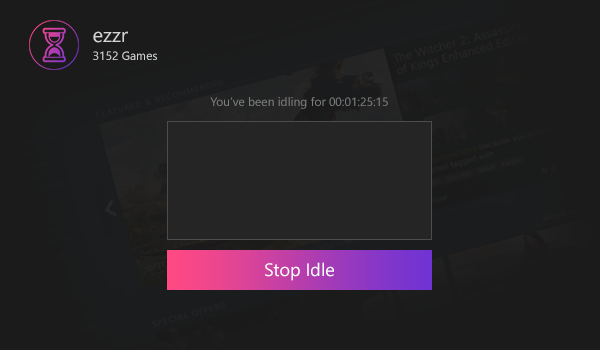
<style>
.page{position:relative;width:600px;height:350px;background:#1b1b1b}
.page>*{position:absolute;margin:0}
.t1{font:12px/18px "SegoeUI";color:#d4d4d4}
.t2{font:20px/18px "SegoeUI";color:#d4d4d4}
.t3{font:12px "SegoeUI";color:#7d7d7d}
.t4{font:18px "SegoeUI";color:#ffffff}
</style>
<div class="page">
<p class="t1" style="left:93px;top:31px;width:64px;height:29px"><span class="t2">ezzr<br></span>3152 Games</p>
<p class="t3" style="left:210px;top:97px;width:178px;height:12px">You’ve been idling for 00:01:25:15</p>
<p class="t4" style="left:265px;top:262px;width:69px;height:19px">Stop Idle</p>
</div>
